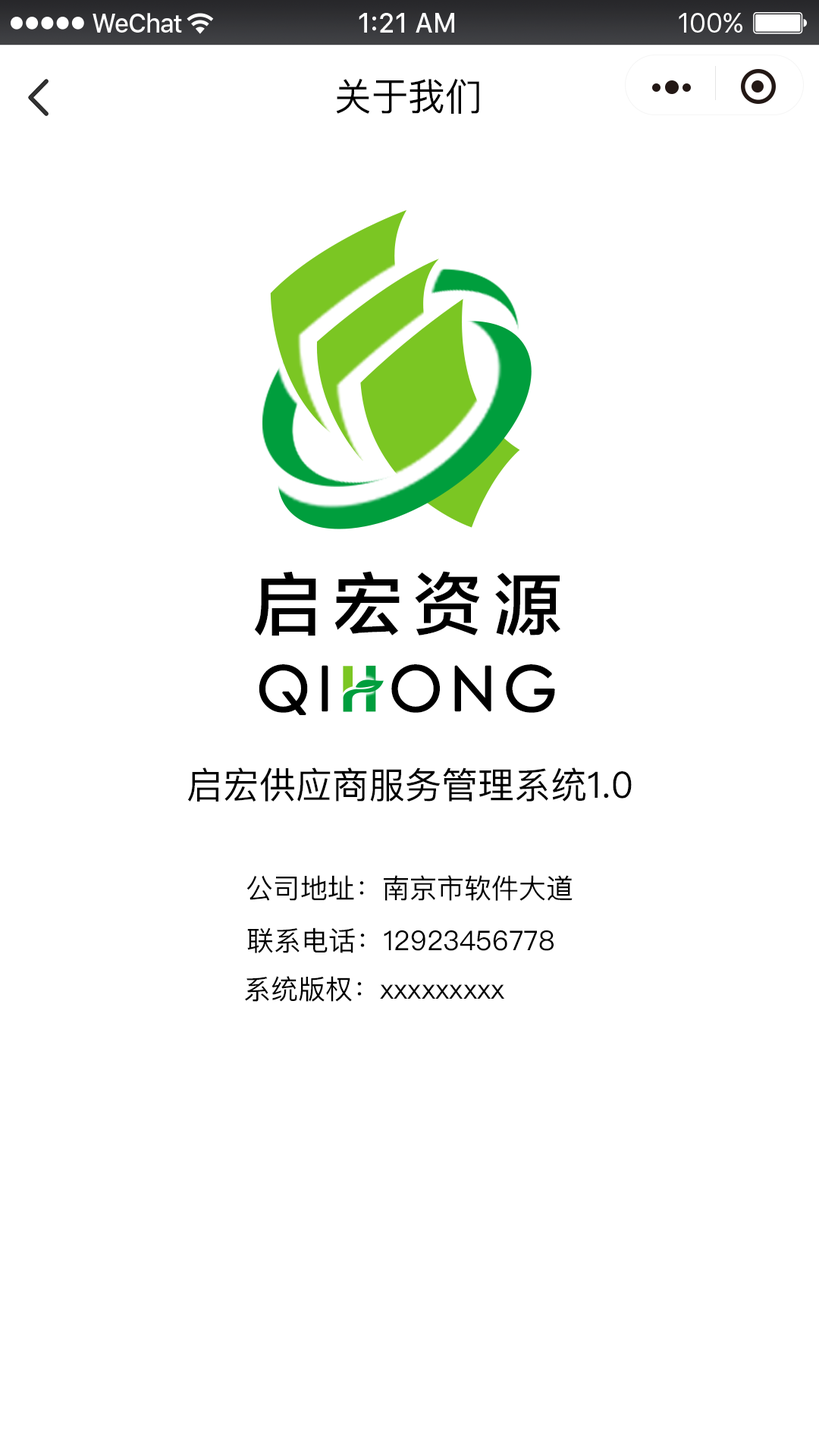
<style>
.page{position:relative;width:819px;height:1456px;background:#ffffff}
.page>*{position:absolute;margin:0}
.t1{font:37.9px "PingFangSC-Regular";color:#000000}
.t2{font:68.2px "FZLTZHK--GBK1-0";letter-spacing:0.18em;color:#000000}
.t3{font:61.6px "CenturyGothic";letter-spacing:0.1em;color:#000000;font-weight:bold}
.t4{font:36.4px "PingFangSC-Regular";color:#000000}
.t5{font:27.3px "PingFangSC-Regular";color:#000000}
</style>
<div class="page">
<p class="t1" style="left:336px;top:78px;width:143px;height:36px">关于我们</p>
<p class="t2" style="left:254px;top:571px;width:306px;height:65px">启宏资源</p>
<p class="t3" style="left:259px;top:664px;width:296px;height:51px">QI  ONG</p>
<p class="t4" style="left:187px;top:767px;width:445px;height:35px">启宏供应商服务管理系统1.0</p>
<p class="t5" style="left:246px;top:875px;width:327px;height:26px">公司地址：南京市软件大道</p>
<p class="t5" style="left:247px;top:927px;width:307px;height:26px">联系电话：12923456778</p>
<p class="t5" style="left:245px;top:976px;width:260px;height:26px">系统版权：xxxxxxxxx</p>
</div>
